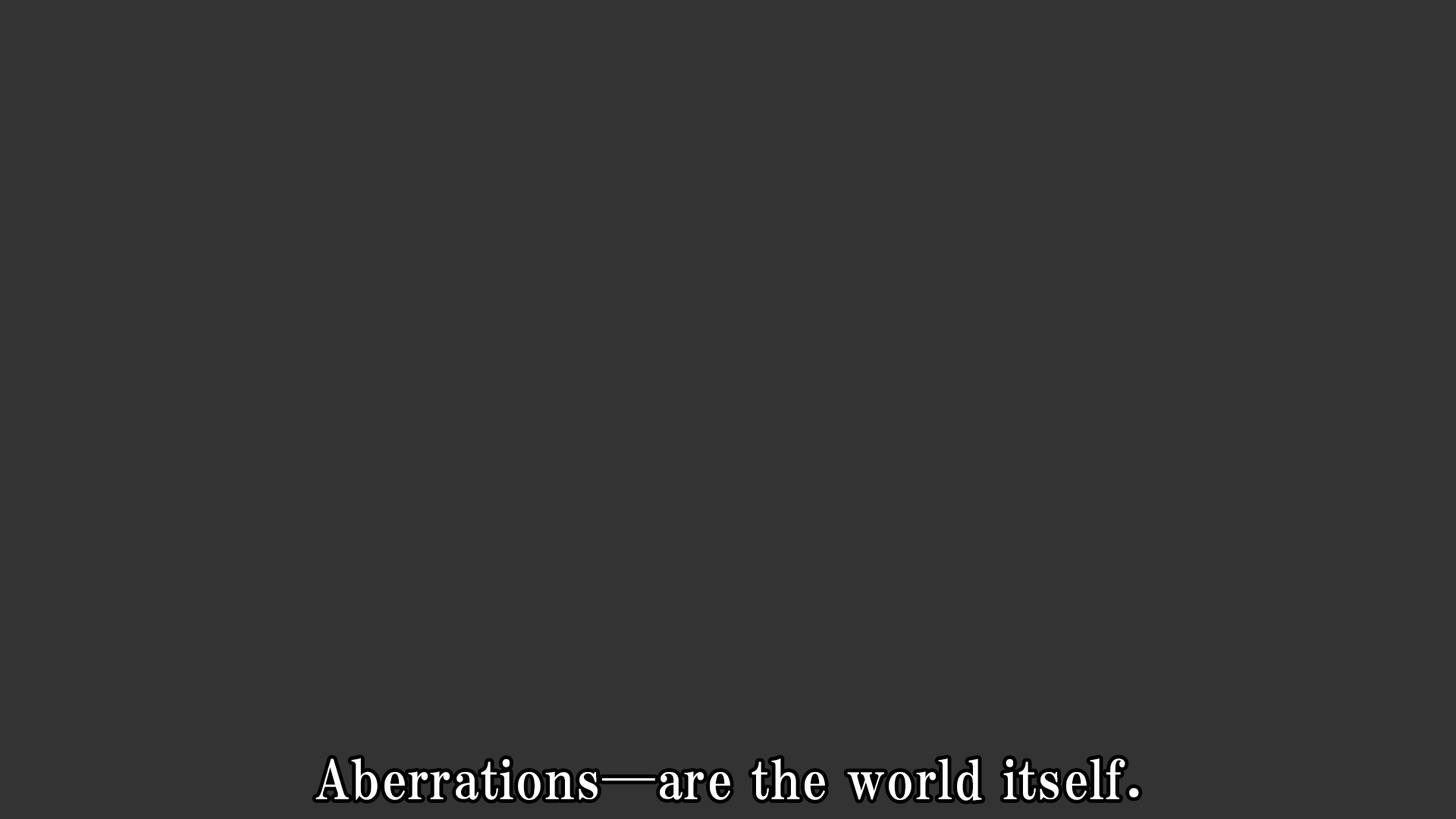
<style>
.page{position:relative;width:1456px;height:819px;background:#333333}
.page>*{position:absolute;margin:0}
.t1{font:53.1px "HGPMinchoE";letter-spacing:0.025em;color:#ffffff}
</style>
<div class="page">
<p class="t1" style="left:315px;top:758px;width:824px;height:43px">Aberrations─are the world itself.</p>
</div>
